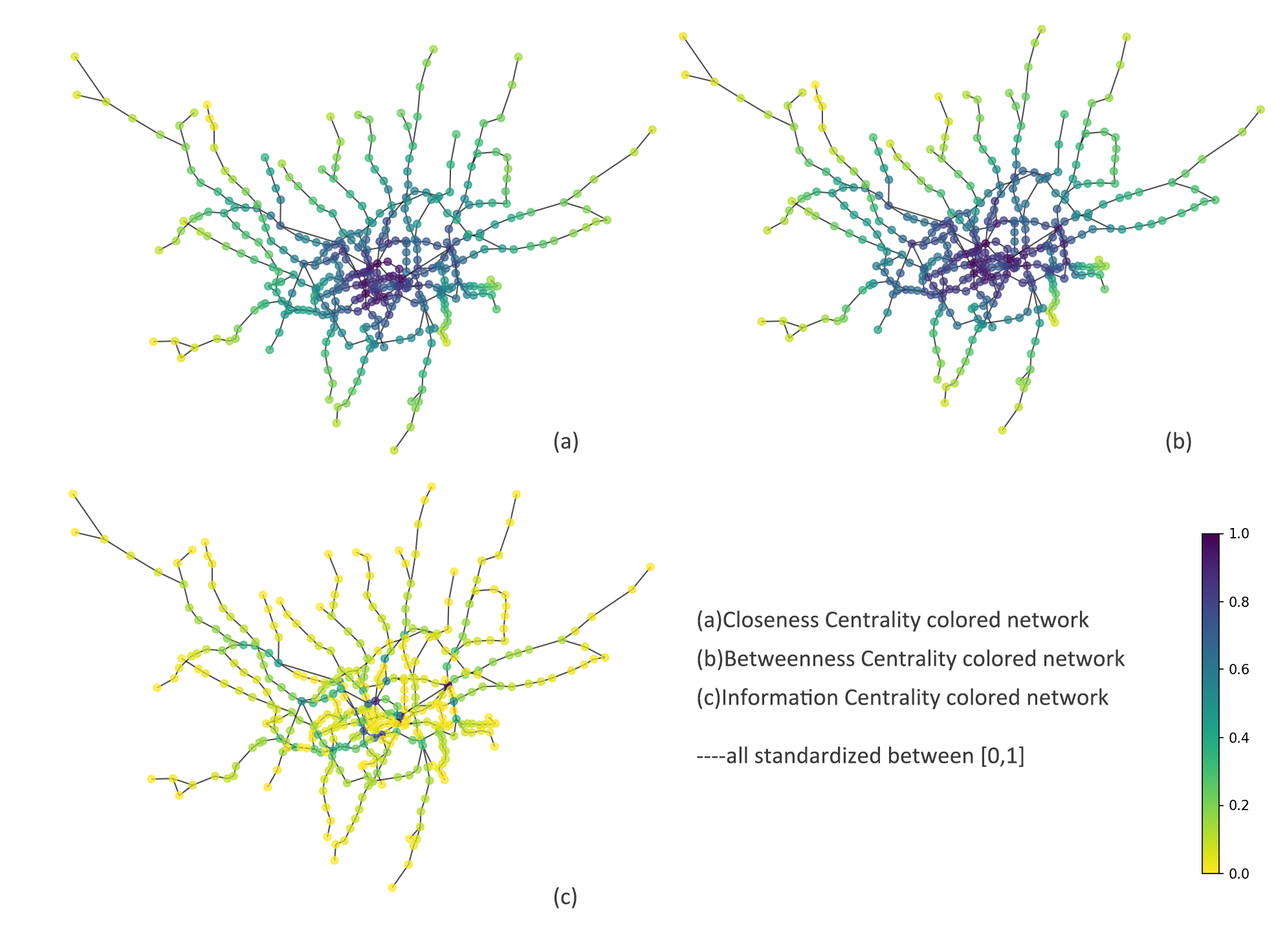
<style>
.page{position:relative;width:1276px;height:935px;background:#ffffff}
.page>*{position:absolute;margin:0}
.t1{font:24.3px "Calibri";color:#3b3b3b}
.t2{font:24.3px/19.4px "Calibri";color:#3b3b3b}
</style>
<div class="page">
<p class="t1" style="left:554px;top:431px;width:24px;height:22px">(a)</p>
<p class="t1" style="left:1166px;top:431px;width:25px;height:22px">(b)</p>
<p class="t2" style="left:697px;top:610px;width:428px;height:157px">(a)Closeness Centrality colored network<br><br>(b)Betweenness Centrality colored network<br><br>(c)Information Centrality colored network<br><br><br>----all standardized between [0,1]</p>
<p class="t1" style="left:554px;top:887px;width:22px;height:21px">(c)</p>
</div>
